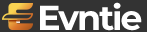
<style>
.page{position:relative;width:147px;height:32px;background:#333333}
.page>*{position:absolute;margin:0}
.t1{font:34.8px "Montserrat-Bold";letter-spacing:-0.06em;color:#ffffff}
</style>
<div class="page">
<p class="t1" style="left:40px;top:2px;width:102px;height:29px">Evntie</p>
</div>
